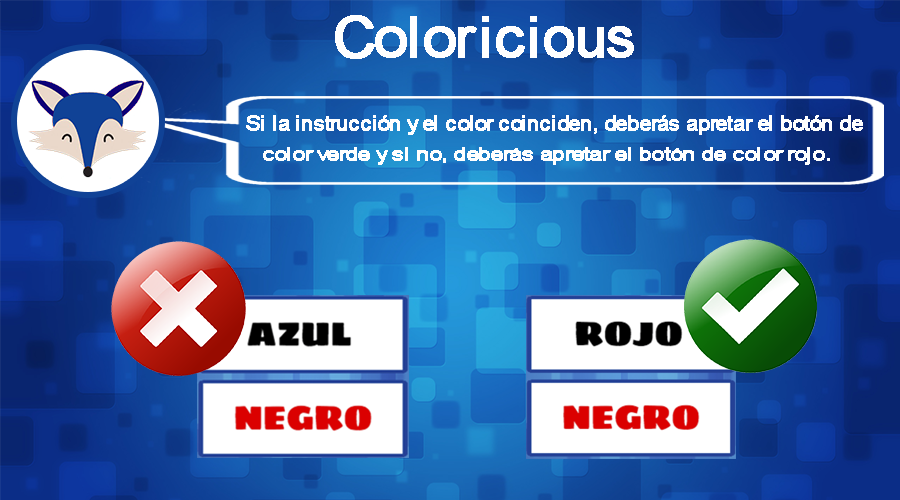
<style>
.page{position:relative;width:900px;height:500px}
.page>*{position:absolute;margin:0}
.t1{font:56.9px "ArialMT";color:#ffffff;font-weight:bold;scale:1.07 1}
.t2{font:56.9px "ArialMT";color:#ffffff;font-weight:bold}
.t3{font:19.9px "ArialMT";color:#ffffff;font-weight:bold;scale:1.1 1}
.t4{font:18.3px "ArialMT";color:#ffffff;font-weight:bold;scale:1.26 1}
</style>
<div class="page">
<p class="t1" style="left:335px;top:15px;width:142px;height:44px">Color</p>
<p class="t2" style="left:482px;top:16px;width:152px;height:42px">icious</p>
<p class="t3" style="left:246px;top:115px;width:617px;height:20px">Si la instrucción y el color coinciden, deberás apretar el botón de</p>
<p class="t4" style="left:263px;top:147px;width:567px;height:18px">color verde y si no, deberás apretar el botón de color rojo.</p>
</div>
